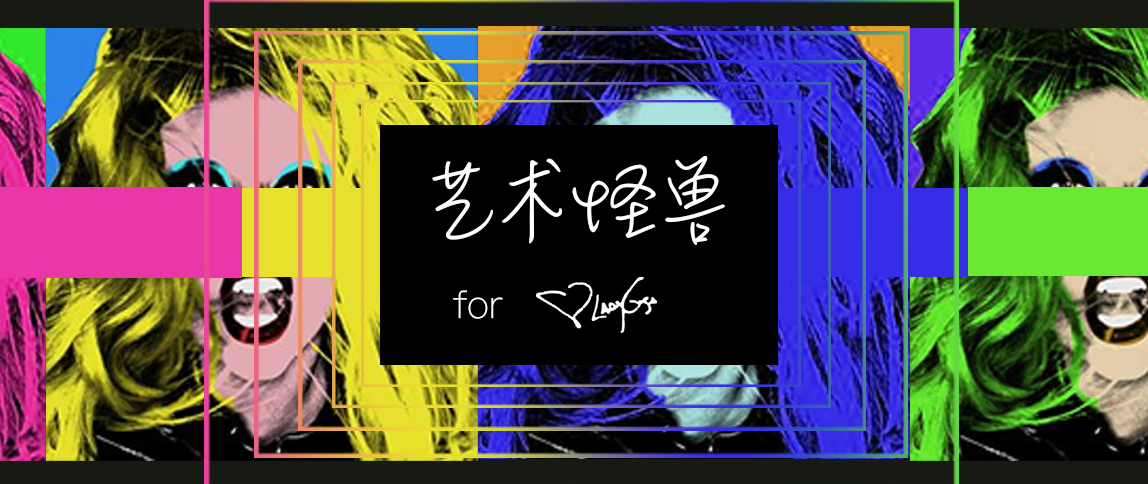
<style>
.page{position:relative;width:1148px;height:484px}
.page>*{position:absolute;margin:0}
.t1{font:111px "MLingWaiMedium-SC";color:#ffffff}
.t2{font:38.4px "PingFangSC-Thin";color:#ffffff}
</style>
<div class="page">
<p class="t1" style="left:432px;top:155px;width:293px;height:90px">艺术怪兽</p>
<p class="t2" style="left:453px;top:290px;width:50px;height:29px">for</p>
</div>
